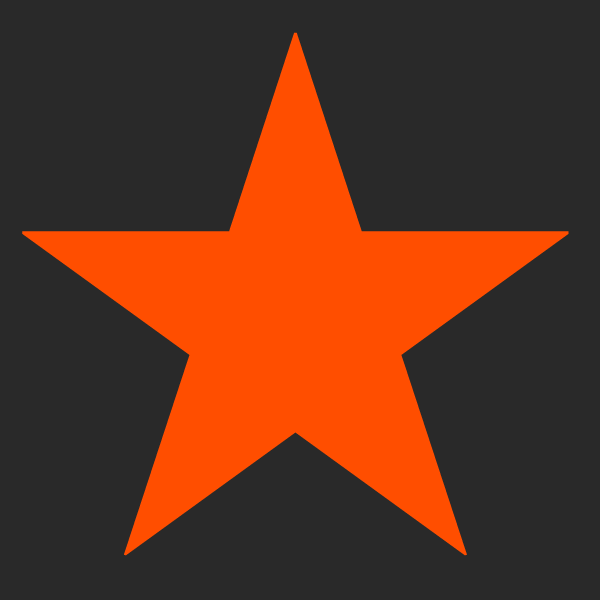
<style>
.page{position:relative;width:600px;height:600px;background:#292929}
.page>*{position:absolute;margin:0}
.t1{font:591px "KozGoPr6N-Regular";letter-spacing:-0.03em;color:#ff4e00}
</style>
<div class="page">
<p class="t1" style="left:22px;top:32px;width:547px;height:524px">★</p>
</div>
